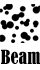
<style>
.page{position:relative;width:40px;height:70px;background:#ffffff}
.page>*{position:absolute;margin:0}
.t1{font:18px "BernardMT-Condensed";color:#000000}
</style>
<div class="page">
<p class="t1" style="left:1px;top:49px;width:39px;height:15px">Beam</p>
</div>
